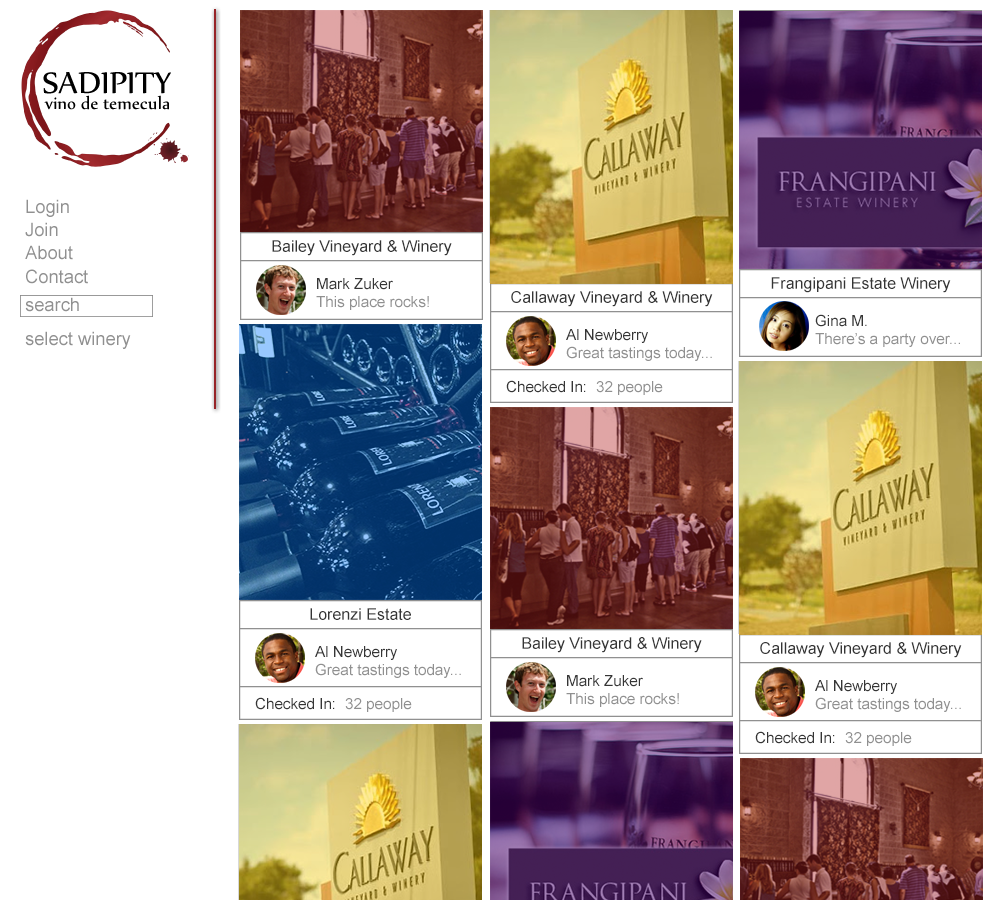
<style>
.page{position:relative;width:1000px;height:900px;background:#ffffff}
.page>*{position:absolute;margin:0}
.t1{font:18.6px "ArialMT";color:#909090}
.t2{font:15.9px "ArialMT";color:#353535}
.t3{font:15.2px "ArialMT";color:#353535}
.t4{font:15.2px "ArialMT";color:#909090}
</style>
<div class="page">
<p class="t1" style="left:26px;top:199px;width:43px;height:18px">Login</p>
<p class="t1" style="left:25px;top:222px;width:33px;height:15px">Join</p>
<p class="t1" style="left:25px;top:245px;width:48px;height:15px">About</p>
<p class="t2" style="left:272px;top:240px;width:180px;height:16px">Bailey Vineyard &amp; Winery</p>
<p class="t1" style="left:26px;top:269px;width:62px;height:15px">Contact</p>
<p class="t3" style="left:317px;top:278px;width:76px;height:12px">Mark Zuker</p>
<p class="t2" style="left:771px;top:277px;width:180px;height:16px">Frangipani Estate Winery</p>
<p class="t2" style="left:511px;top:291px;width:202px;height:16px">Callaway Vineyard &amp; Winery</p>
<p class="t1" style="left:25px;top:297px;width:54px;height:15px">search</p>
<p class="t4" style="left:316px;top:296px;width:113px;height:14px">This place rocks!</p>
<p class="t3" style="left:815px;top:314px;width:52px;height:13px">Gina M.</p>
<p class="t3" style="left:566px;top:329px;width:82px;height:14px">Al Newberry</p>
<p class="t1" style="left:25px;top:331px;width:106px;height:18px">select winery</p>
<p class="t4" style="left:815px;top:333px;width:145px;height:14px">There’s a party over...</p>
<p class="t4" style="left:566px;top:346px;width:146px;height:15px">Great tastings today...</p>
<p class="t3" style="left:506px;top:380px;width:80px;height:13px">Checked In:</p>
<p class="t4" style="left:596px;top:381px;width:67px;height:14px">32 people</p>
<p class="t2" style="left:310px;top:608px;width:101px;height:12px">Lorenzi Estate</p>
<p class="t2" style="left:522px;top:637px;width:180px;height:16px">Bailey Vineyard &amp; Winery</p>
<p class="t3" style="left:315px;top:646px;width:82px;height:14px">Al Newberry</p>
<p class="t2" style="left:760px;top:642px;width:202px;height:16px">Callaway Vineyard &amp; Winery</p>
<p class="t4" style="left:315px;top:663px;width:146px;height:15px">Great tastings today...</p>
<p class="t3" style="left:567px;top:675px;width:76px;height:12px">Mark Zuker</p>
<p class="t3" style="left:815px;top:680px;width:82px;height:14px">Al Newberry</p>
<p class="t3" style="left:255px;top:697px;width:80px;height:13px">Checked In:</p>
<p class="t4" style="left:345px;top:698px;width:67px;height:14px">32 people</p>
<p class="t4" style="left:566px;top:693px;width:113px;height:14px">This place rocks!</p>
<p class="t4" style="left:815px;top:697px;width:146px;height:15px">Great tastings today...</p>
<p class="t3" style="left:755px;top:731px;width:80px;height:13px">Checked In:</p>
<p class="t4" style="left:845px;top:732px;width:67px;height:14px">32 people</p>
</div>
